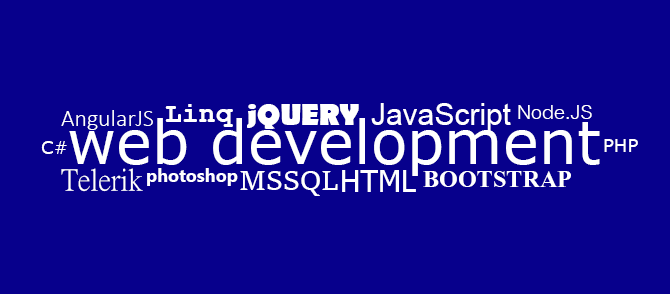
<style>
.page{position:relative;width:670px;height:294px;background:#07008c}
.page>*{position:absolute;margin:0}
.t1{font:24px "Calibri-Light";color:#ffffff}
.t2{font:28px "CourierNewPS-BoldMT";color:#ffffff}
.t3{font:30px "BerlinSansFB-Bold";color:#ffffff}
.t4{font:30px "ArialMT";color:#ffffff}
.t5{font:30px "CordiaNew";color:#ffffff}
.t6{font:60px "Verdana";color:#ffffff}
.t7{font:18px "Verdana";color:#ffffff}
.t8{font:30px "PMingLiU-ExtB";color:#ffffff}
.t9{font:18px "KhmerUI-Bold";color:#ffffff}
.t10{font:30px "SitkaText";color:#ffffff}
.t11{font:30px "Tahoma";color:#ffffff}
.t12{font:30px "Aparajita-Bold";color:#ffffff}
</style>
<div class="page">
<p class="t1" style="left:61px;top:110px;width:92px;height:20px">AngularJS</p>
<p class="t2" style="left:165px;top:104px;width:68px;height:23px">Linq</p>
<p class="t3" style="left:247px;top:104px;width:112px;height:25px">jQUERY</p>
<p class="t4" style="left:371px;top:103px;width:140px;height:28px">JavaScript</p>
<p class="t5" style="left:518px;top:105px;width:74px;height:14px">Node.JS</p>
<p class="t6" style="left:69px;top:118px;width:531px;height:58px">web development</p>
<p class="t7" style="left:41px;top:141px;width:26px;height:13px">C#</p>
<p class="t7" style="left:604px;top:139px;width:34px;height:13px">PHP</p>
<p class="t8" style="left:61px;top:168px;width:82px;height:24px">Telerik</p>
<p class="t9" style="left:147px;top:168px;width:91px;height:18px">photoshop</p>
<p class="t10" style="left:240px;top:171px;width:98px;height:25px">MSSQL</p>
<p class="t11" style="left:342px;top:170px;width:74px;height:22px">HTML</p>
<p class="t12" style="left:423px;top:171px;width:148px;height:16px">BOOTSTRAP</p>
</div>
